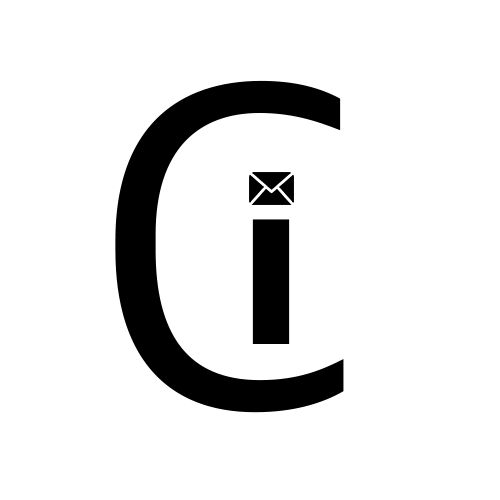
<style>
.page{position:relative;width:500px;height:500px;background:#ffffff}
.page>*{position:absolute;margin:0}
.t1{font:478px "AppleSDGothicNeo-Regular";color:#000000}
.t2{font:250.9px "AppleSDGothicNeo-Regular";color:#000000;scale:1.9 1}
</style>
<div class="page">
<p class="t1" style="left:115px;top:80px;width:229px;height:333px">C</p>
<p class="t2" style="left:252px;top:219px;width:38px;height:125px">ı</p>
</div>
